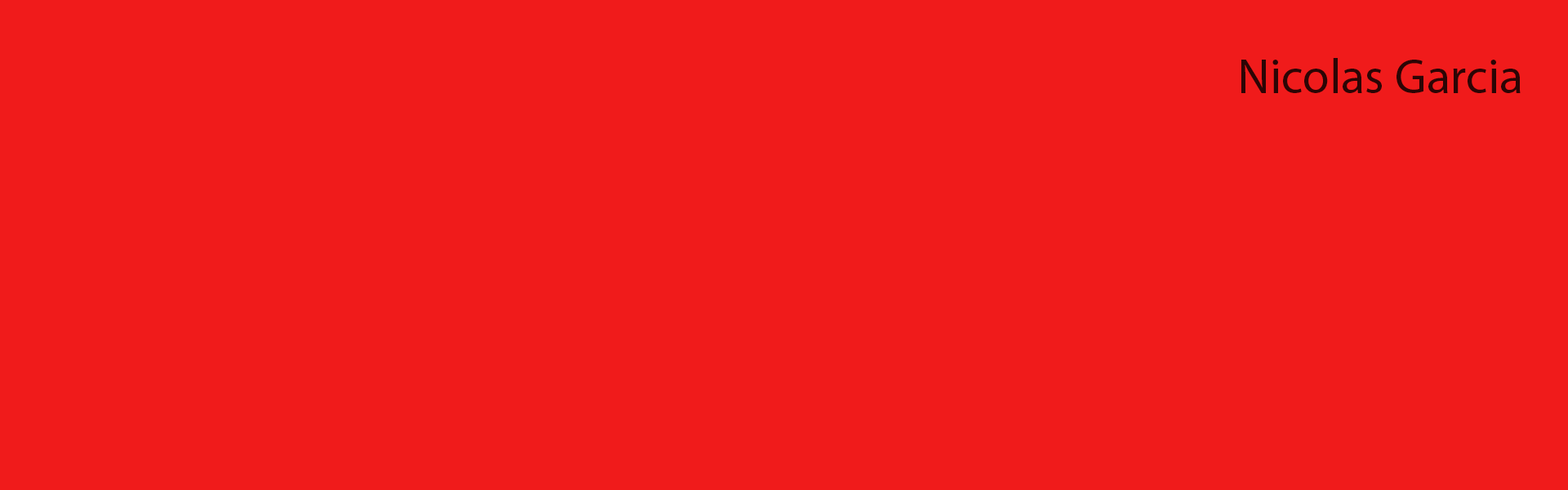
<style>
.page{position:relative;width:1568px;height:490px;background:#f01b1b}
.page>*{position:absolute;margin:0}
.t1{font:49px "MyriadPro-Regular";color:#2c0505}
</style>
<div class="page">
<p class="t1" style="left:1241px;top:58px;width:280px;height:35px">Nicolas Garcia</p>
</div>
